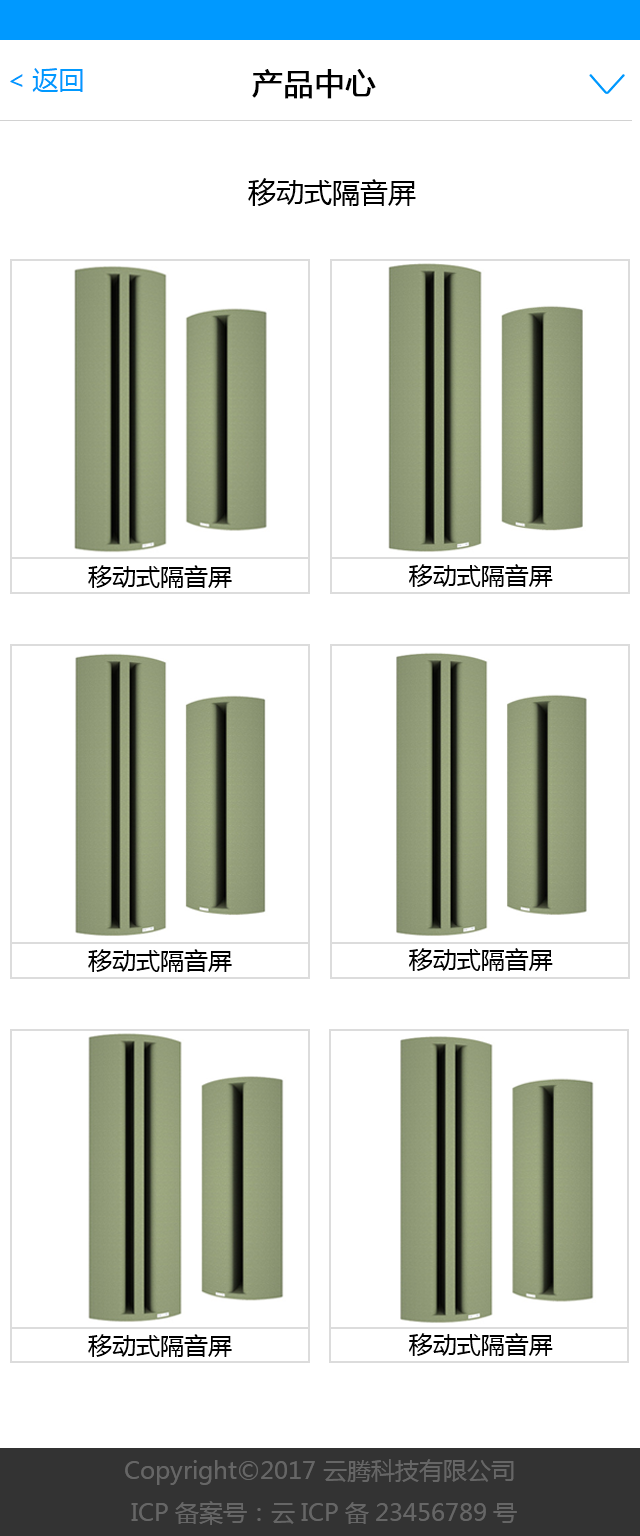
<style>
.page{position:relative;width:640px;height:1536px;background:#ffffff}
.page>*{position:absolute;margin:0}
.t1{font:26px "MicrosoftYaHei";color:#0099ff}
.t2{font:30px "MicrosoftYaHei";color:#000000;font-weight:bold}
.t3{font:28px "MicrosoftYaHei";color:#000000}
.t4{font:24px "MicrosoftYaHei";color:#000000}
.t5{font:24px "MicrosoftYaHei";color:#666666}
</style>
<div class="page">
<p class="t1" style="left:10px;top:68px;width:73px;height:24px">&lt;返回</p>
<p class="t2" style="left:252px;top:69px;width:124px;height:30px">产品中心</p>
<p class="t3" style="left:248px;top:178px;width:168px;height:28px">移动式隔音屏</p>
<p class="t4" style="left:88px;top:565px;width:144px;height:23px">移动式隔音屏</p>
<p class="t4" style="left:409px;top:564px;width:144px;height:23px">移动式隔音屏</p>
<p class="t4" style="left:88px;top:949px;width:144px;height:23px">移动式隔音屏</p>
<p class="t4" style="left:409px;top:948px;width:144px;height:23px">移动式隔音屏</p>
<p class="t4" style="left:88px;top:1334px;width:144px;height:23px">移动式隔音屏</p>
<p class="t4" style="left:409px;top:1333px;width:144px;height:23px">移动式隔音屏</p>
<p class="t5" style="left:125px;top:1459px;width:392px;height:66px;text-align:justify">Copyright©2017 云腾科技有限公司<br> ICP备案号：云ICP备23456789号</p>
</div>
